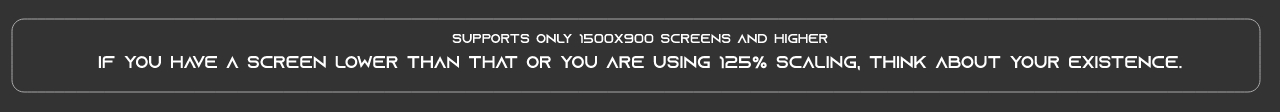
<style>
.page{position:relative;width:1280px;height:112px;background:#333333}
.page>*{position:absolute;margin:0}
.t1{font:13px "AzonixRegular";color:#ffffff}
.t2{font:17px "AzonixRegular";color:#ffffff}
</style>
<div class="page">
<p class="t1" style="left:452px;top:33px;width:376px;height:11px">supports only 1500x900 screens and higher</p>
<p class="t2" style="left:98px;top:56px;width:1084px;height:15px">IF you have a screen lower than that or you are using 125% scaling, think about your existence.</p>
</div>
